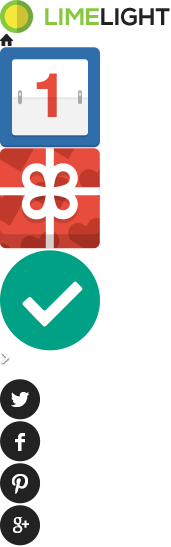
<style>
.page{position:relative;width:171px;height:547px;background:#ffffff}
.page>*{position:absolute;margin:0}
.t1{font:24px "NexaBold";color:#222222;text-transform:uppercase}
.t2{font:24px "NexaBold";color:#86c840;text-transform:uppercase}
</style>
<div class="page">
<p class="t1" style="left:45px;top:7px;width:125px;height:19px"><span class="t2">Lime</span>Light</p>
</div>
